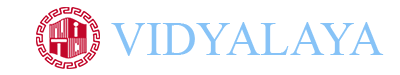
<style>
.page{position:relative;width:400px;height:75px;background:#ffffff}
.page>*{position:absolute;margin:0}
.t1{font:48px "TimesNewRomanPSMT";color:#87c3f7}
</style>
<div class="page">
<p class="t1" style="left:111px;top:22px;width:273px;height:34px">VIDYALAYA</p>
</div>
